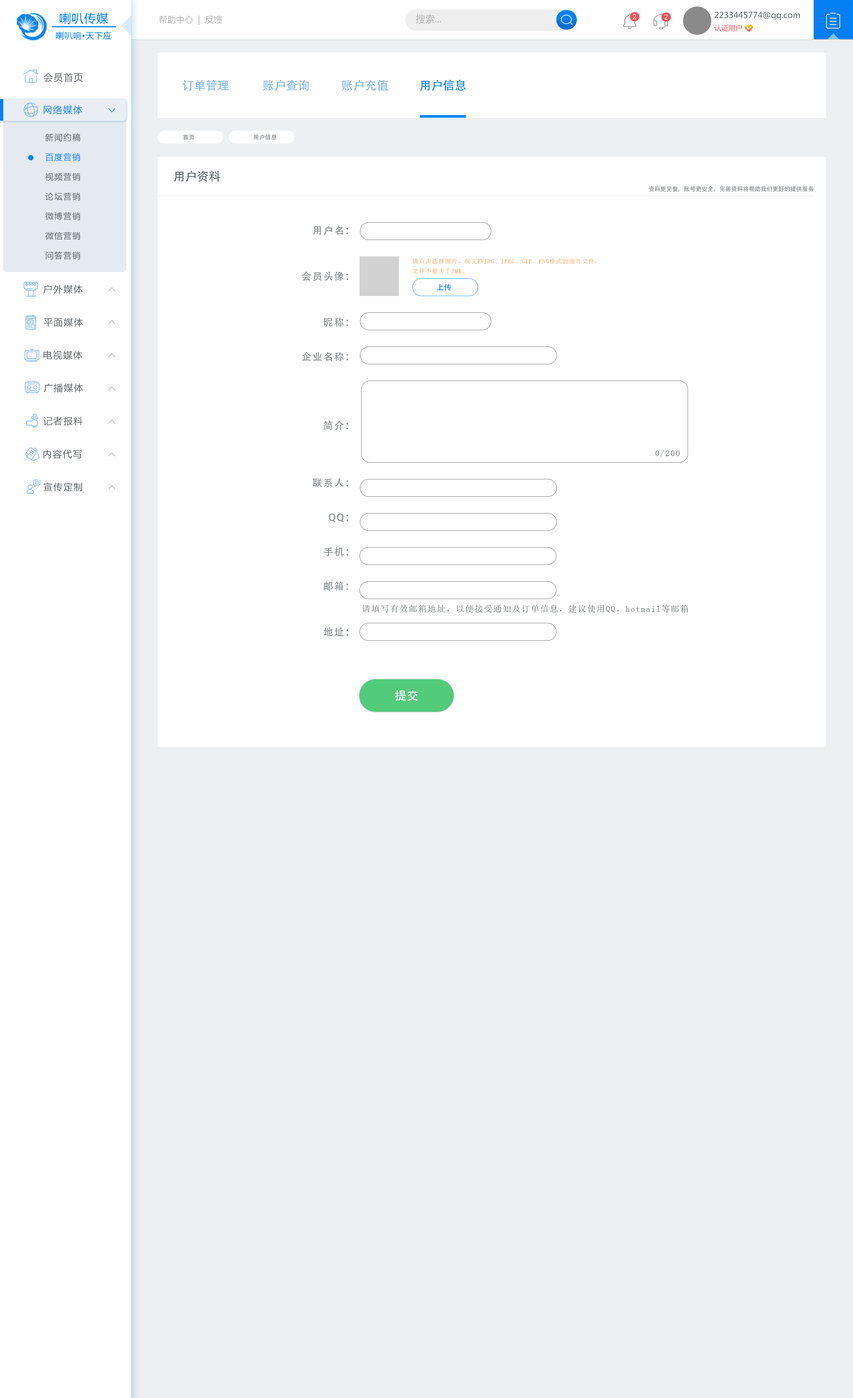
<style>
.page{position:relative;width:853px;height:1398px;background:#ffffff}
.page>*{position:absolute;margin:0}
.t1{font:8.6px "MicrosoftYaHei";color:#b4b4b4}
.t2{font:9.4px "MicrosoftYaHei";color:#b4b4b4}
.t3{font:6.9px "Tahoma";letter-spacing:0.1em;color:#ffffff;text-transform:uppercase}
.t4{font:8.2px/12.3px "MicrosoftYaHei";color:#5c6165}
.t5{font:7.1px/12.3px "MicrosoftYaHei";color:#fe4d55}
.t6{font:9.2px "MicrosoftYaHei";letter-spacing:0.1em;color:#5c6165}
.t7{font:11.8px "AdobeHeitiStd-Regular";color:#7db6eb}
.t8{font:11.8px "AdobeHeitiStd-Regular";color:#0582f5}
.t9{font:9.2px "MicrosoftYaHei";letter-spacing:0.1em;color:#0582f5}
.t10{font:8.2px/19.7px "MicrosoftYaHei";letter-spacing:0.1em;color:#5c6165}
.t11{font:8.2px/19.7px "MicrosoftYaHei";letter-spacing:0.1em;color:#0381f5}
.t12{font:5.9px "AdobeHeitiStd-Regular";color:#878b8e}
.t13{font:11.8px "AdobeHeitiStd-Regular";color:#5c6165}
.t14{font:9.8px/11.5px "AdobeHeitiStd-Regular";letter-spacing:0.1em;color:#878b8e}
.t15{font:5.9px/9.8px "SimSun";letter-spacing:0.1em;color:#ff9b3a}
.t16{font:7.4px "AdobeHeitiStd-Regular";color:#0582f5}
.t17{font:8.5px "SimSun";letter-spacing:0.1em;color:#5c6165}
.t18{font:11.8px "AdobeHeitiStd-Regular";color:#fefefe}
</style>
<div class="page">
<p class="t1" style="left:159px;top:15px;width:63px;height:10px">帮助中心  |  反馈</p>
<p class="t2" style="left:416px;top:14px;width:25px;height:10px">搜索...</p>
<p class="t3" style="left:633px;top:14px;width:3px;height:5px">2</p>
<p class="t3" style="left:664px;top:14px;width:4px;height:6px">2</p>
<p class="t4" style="left:714px;top:11px;width:86px;height:20px">2233445774@qq.com<br><span class="t5">认证用户</span></p>
<p class="t6" style="left:44px;top:73px;width:39px;height:9px">会员首页</p>
<p class="t7" style="left:182px;top:80px;width:47px;height:11px">订单管理</p>
<p class="t7" style="left:263px;top:80px;width:46px;height:11px">账户查询</p>
<p class="t7" style="left:341px;top:80px;width:47px;height:11px">账户充值</p>
<p class="t8" style="left:420px;top:80px;width:46px;height:11px">用户信息</p>
<p class="t9" style="left:44px;top:105px;width:38px;height:9px">网络媒体</p>
<p class="t10" style="left:45px;top:133px;width:35px;height:127px">新闻约稿<br><span class="t11">百度营销<br></span>视频营销<br>论坛营销<br>微博营销<br>微信营销<br>问答营销</p>
<p class="t12" style="left:183px;top:134px;width:11px;height:6px">首页</p>
<p class="t12" style="left:254px;top:134px;width:23px;height:6px">用户信息</p>
<p class="t13" style="left:174px;top:171px;width:46px;height:11px">用户资料</p>
<p class="t12" style="left:648px;top:186px;width:166px;height:6px">资料更完整，账号更安全。完善资料将帮助我们更好的提供服务</p>
<p class="t14" style="left:302px;top:226px;width:46px;height:411px;text-align:right">用户名：<br><br><br><br>会员头像：<br><br><br><br>昵称：<br><br><br>企业名称：<br><br><br><br><br><br>简介：<br><br><br><br><br>联系人：<br><br><br>QQ：<br><br><br>手机：<br><br><br>邮箱：<br><br><br><br>地址：</p>
<p class="t15" style="left:412px;top:258px;width:185px;height:16px">请点击选择图片，仅支持JPG、JPEG、GIF、PNG格式的图片文件，<br>文件不能大于2MB。</p>
<p class="t6" style="left:43px;top:285px;width:40px;height:9px">户外媒体</p>
<p class="t16" style="left:437px;top:284px;width:14px;height:7px">上传</p>
<p class="t6" style="left:44px;top:318px;width:39px;height:9px">平面媒体</p>
<p class="t6" style="left:43px;top:351px;width:39px;height:9px">电视媒体</p>
<p class="t6" style="left:44px;top:383px;width:39px;height:10px">广播媒体</p>
<p class="t6" style="left:43px;top:417px;width:40px;height:9px">记者报料</p>
<p class="t6" style="left:43px;top:450px;width:39px;height:9px">内容代写</p>
<p class="t17" style="left:655px;top:450px;width:25px;height:7px">0/200</p>
<p class="t6" style="left:43px;top:482px;width:39px;height:10px">宣传定制</p>
<p class="t17" style="left:362px;top:605px;width:326px;height:8px">请填写有效邮箱地址，以便接受通知及订单信息，建议使用QQ，hotmail等邮箱</p>
<p class="t18" style="left:395px;top:690px;width:22px;height:11px">提交</p>
</div>
